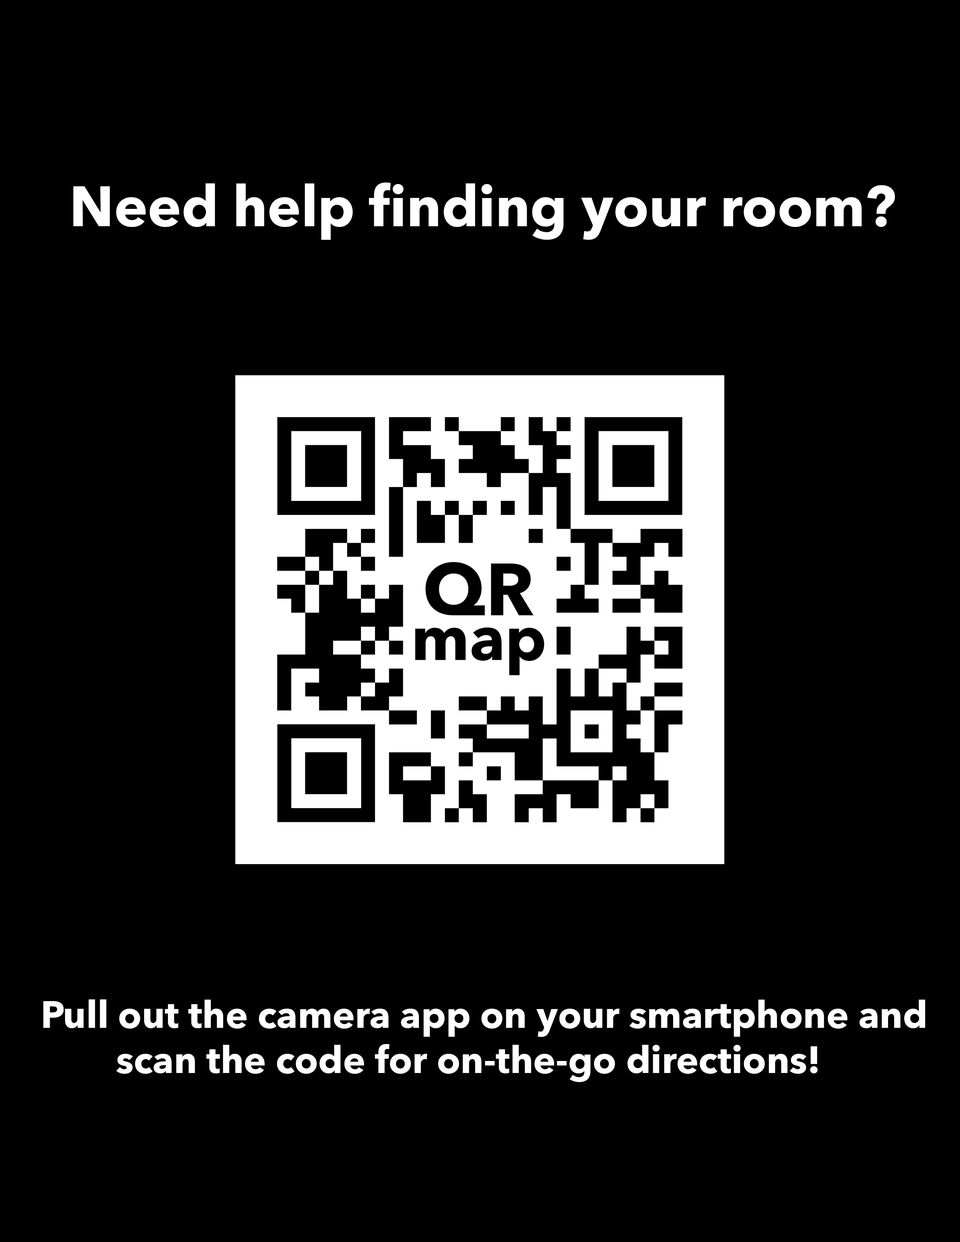
<style>
.page{position:relative;width:960px;height:1242px;background:#000000}
.page>*{position:absolute;margin:0}
.t1{font:56.5px "AvenirNext-Bold";color:#ffffff}
.t2{font:37.6px "AvenirNext-Bold";color:#ffffff}
</style>
<div class="page">
<p class="t1" style="left:73px;top:183px;width:822px;height:57px">Need help finding your room?</p>
<p class="t2" style="left:43px;top:999px;width:882px;height:83px">Pull out the camera app on your smartphone and <br>        scan the code for on-the-go directions!</p>
</div>
